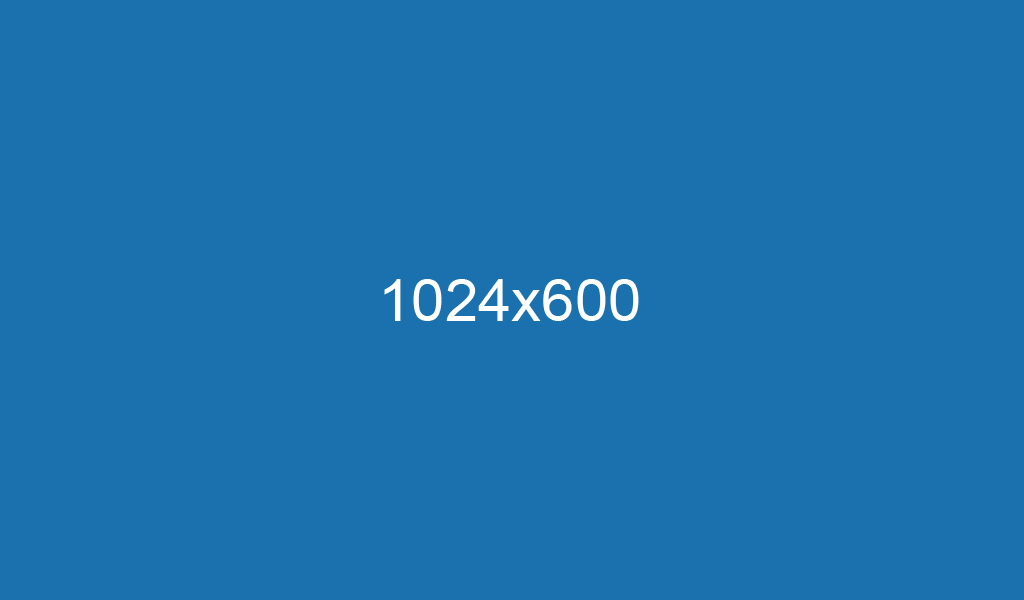
<style>
.page{position:relative;width:1024px;height:600px;background:#1a71ae}
.page>*{position:absolute;margin:0}
.t1{font:60px "ArialMT";color:#ffffff}
</style>
<div class="page">
<p class="t1" style="left:384px;top:279px;width:255px;height:42px">1024x600</p>
</div>
